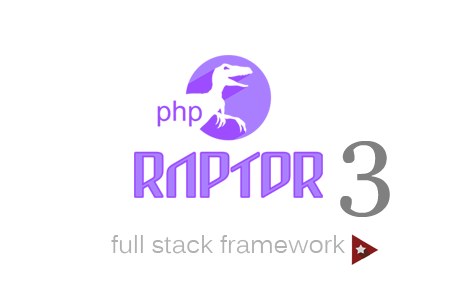
<style>
.page{position:relative;width:464px;height:306px;background:#ffffff}
.page>*{position:absolute;margin:0}
.t1{font:105.2px "Georgia";color:#808080}
.t2{font:24.6px "Kalinga";color:#b1b1b1}
</style>
<div class="page">
<p class="t1" style="left:340px;top:141px;width:50px;height:76px">3</p>
<p class="t2" style="left:111px;top:234px;width:234px;height:20px">full stack framework</p>
</div>
